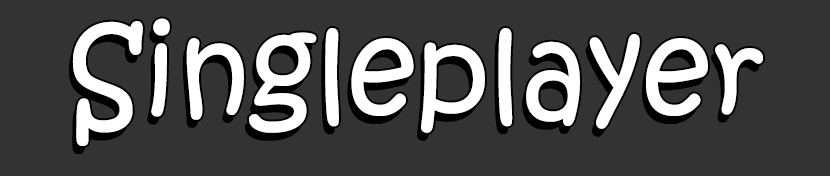
<style>
.page{position:relative;width:830px;height:176px;background:#333333}
.page>*{position:absolute;margin:0}
.t1{font:124.4px "KristenITC-Regular";color:#ffffff}
</style>
<div class="page">
<p class="t1" style="left:72px;top:18px;width:691px;height:128px">Singleplayer</p>
</div>
